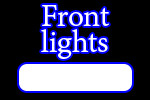
<style>
.page{position:relative;width:150px;height:100px;background:#000000}
.page>*{position:absolute;margin:0}
.t1{font:33.6px/26px "AdobeDevanagari-Regular";color:#ffffff}
</style>
<div class="page">
<p class="t1" style="left:41px;top:5px;width:68px;height:54px;text-align:center">Front<br>lights</p>
</div>
